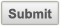
<style>
.page{position:relative;width:60px;height:26px}
.page>*{position:absolute;margin:0}
.t1{font:13px "Arial-BoldMT";color:#595959}
</style>
<div class="page">
<p class="t1" style="left:8px;top:8px;width:44px;height:11px">Submit</p>
</div>
